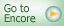
<style>
.page{position:relative;width:64px;height:26px}
.page>*{position:absolute;margin:0}
.t1{font:10.5px/10px "Tahoma";color:#336633}
</style>
<div class="page">
<p class="t1" style="left:4px;top:4px;width:32px;height:19px">Go to<br>Encore</p>
</div>
